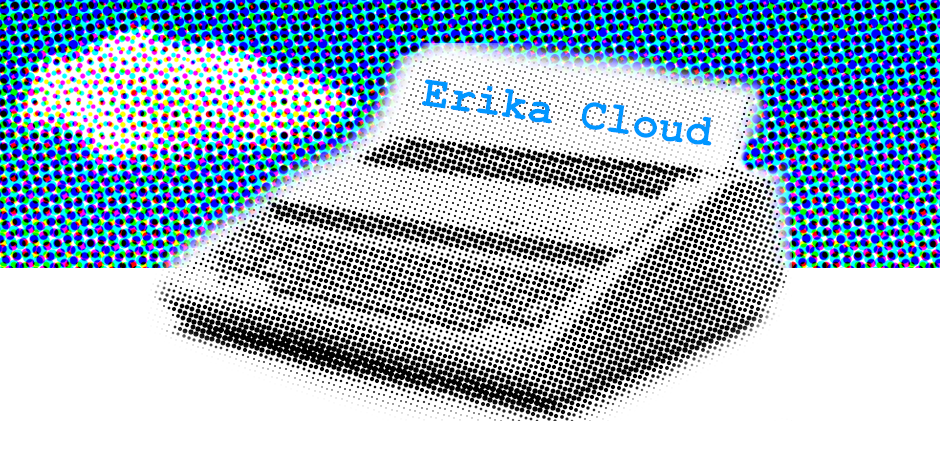
<style>
.page{position:relative;width:940px;height:465px;background:#ffffff}
.page>*{position:absolute;margin:0}
.t1{font:44.1px "CourierNewPS-BoldMT";color:#0096ff}
</style>
<div class="page">
<p class="t1" style="left:422px;top:79px;width:290px;height:67px;rotate:8deg">Erika Cloud</p>
</div>
